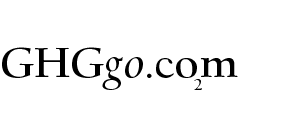
<style>
.page{position:relative;width:300px;height:129px;background:#ffffff}
.page>*{position:absolute;margin:0}
.t1{font:48px "UCBerkeleyOS-Bold";color:#000000}
.t2{font:48px "UCBerkeleyOS-BoldItalic";color:#000000}
.t3{font:18px "UCBerkeleyOS-Bold";color:#000000}
</style>
<div class="page">
<p class="t1" style="left:2px;top:47px;width:236px;height:43px">GHG<span class="t2">go</span>.com</p>
<p class="t3" style="left:194px;top:79px;width:8px;height:11px">2</p>
</div>
